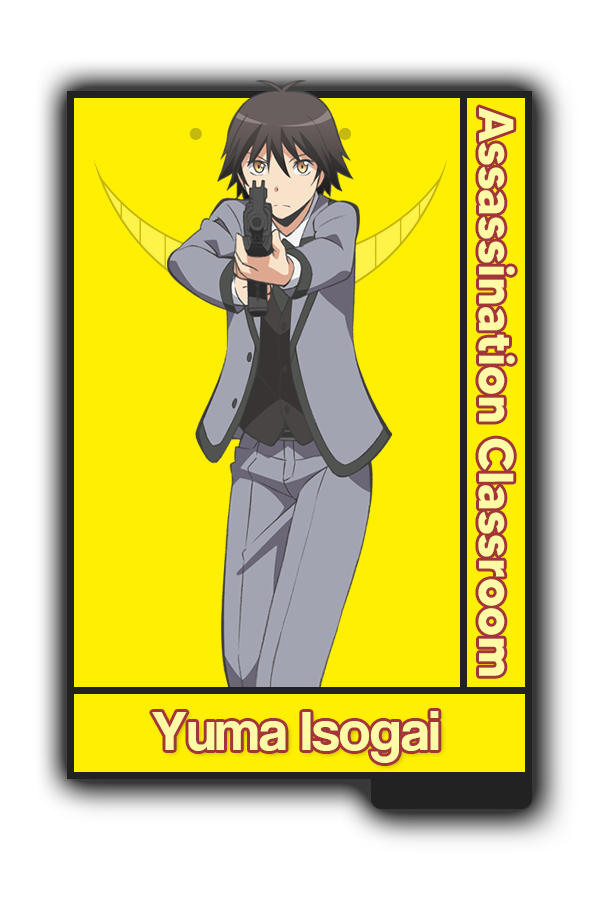
<style>
.page{position:relative;width:600px;height:900px;background:#ffef03}
.page>*{position:absolute;margin:0}
.t1{font:48.8px "MADETOMMY-Bold";color:#fefaa5}
.t2{font:57.8px "CoolveticaRg-Regular";color:#fefaa5}
</style>
<div class="page">
<p class="t1" style="left:478px;top:107px;width:37px;height:569px;rotate:90deg">Assassination Classroom</p>
<p class="t2" style="left:152px;top:711px;width:287px;height:52px">Yuma Isogai</p>
</div>
